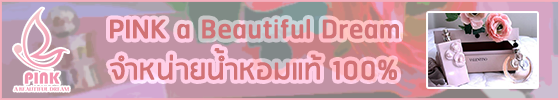
<style>
.page{position:relative;width:560px;height:100px}
.page>*{position:absolute;margin:0}
.t1{font:34.3px "RSU-Bold";color:#d17275}
</style>
<div class="page">
<p class="t1" style="left:109px;top:19px;width:290px;height:61px;text-align:center">PINK a Beautiful Dream<br>จำหน่ายน้ำหอมแท้ 100%</p>
</div>
